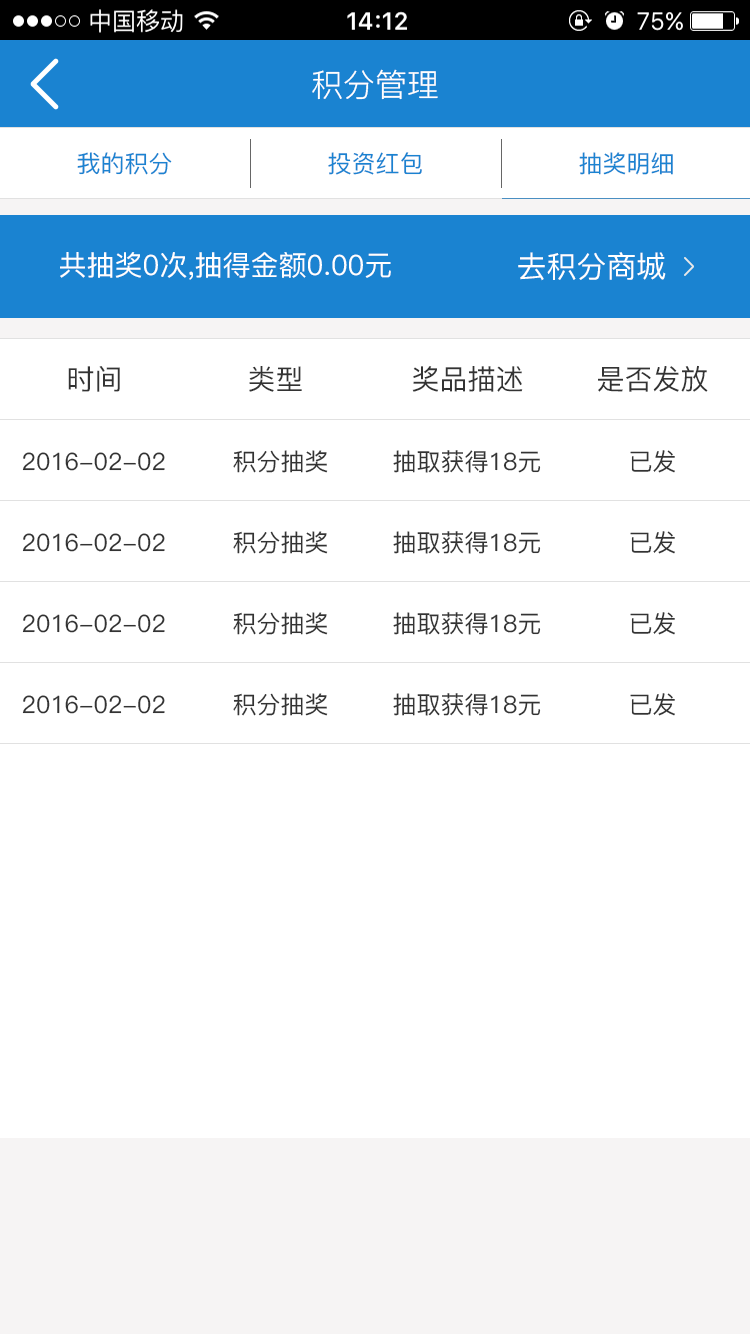
<style>
.page{position:relative;width:750px;height:1334px;background:#ffffff}
.page>*{position:absolute;margin:0}
.t1{font:32px "PingFang-SC-Regular";color:#ffffff}
.t2{font:24px "PingFang-SC-Medium";color:#1a83d1}
.t3{font:28px "PingFang-SC-Medium";color:#ffffff}
.t4{font:30px "PingFang-SC-Medium";color:#ffffff}
.t5{font:28px "PingFang-SC-Medium";color:#333333}
.t6{font:24px "PingFang-SC-Medium";color:#333333}
</style>
<div class="page">
<p class="t1" style="left:312px;top:69px;width:126px;height:31px">积分管理</p>
<p class="t2" style="left:77px;top:152px;width:95px;height:23px">我的积分</p>
<p class="t2" style="left:328px;top:152px;width:94px;height:23px">投资红包</p>
<p class="t2" style="left:579px;top:152px;width:94px;height:23px">抽奖明细</p>
<p class="t3" style="left:60px;top:252px;width:331px;height:28px">共抽奖0次,抽得金额0.00元</p>
<p class="t4" style="left:518px;top:252px;width:148px;height:29px">去积分商城</p>
<p class="t5" style="left:68px;top:366px;width:52px;height:26px">时间</p>
<p class="t5" style="left:249px;top:366px;width:53px;height:26px">类型</p>
<p class="t5" style="left:412px;top:366px;width:111px;height:26px">奖品描述</p>
<p class="t5" style="left:598px;top:365px;width:110px;height:27px">是否发放</p>
<p class="t6" style="left:22px;top:452px;width:143px;height:19px">2016-02-02</p>
<p class="t6" style="left:233px;top:450px;width:95px;height:23px">积分抽奖</p>
<p class="t6" style="left:393px;top:450px;width:148px;height:23px">抽取获得18元</p>
<p class="t6" style="left:630px;top:450px;width:45px;height:23px">已发</p>
<p class="t6" style="left:22px;top:533px;width:143px;height:19px">2016-02-02</p>
<p class="t6" style="left:233px;top:531px;width:95px;height:23px">积分抽奖</p>
<p class="t6" style="left:393px;top:531px;width:148px;height:23px">抽取获得18元</p>
<p class="t6" style="left:630px;top:531px;width:45px;height:23px">已发</p>
<p class="t6" style="left:22px;top:614px;width:143px;height:19px">2016-02-02</p>
<p class="t6" style="left:233px;top:612px;width:95px;height:23px">积分抽奖</p>
<p class="t6" style="left:393px;top:612px;width:148px;height:23px">抽取获得18元</p>
<p class="t6" style="left:630px;top:612px;width:45px;height:23px">已发</p>
<p class="t6" style="left:22px;top:695px;width:143px;height:19px">2016-02-02</p>
<p class="t6" style="left:233px;top:693px;width:95px;height:23px">积分抽奖</p>
<p class="t6" style="left:393px;top:693px;width:148px;height:23px">抽取获得18元</p>
<p class="t6" style="left:630px;top:693px;width:45px;height:23px">已发</p>
</div>
